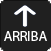
<style>
.page{position:relative;width:51px;height:51px;background:#202020}
.page>*{position:absolute;margin:0}
.t1{font:14px "MyriadPro-Regular";color:#ffffff;text-transform:uppercase}
</style>
<div class="page">
<p class="t1" style="left:4px;top:31px;width:43px;height:10px">ARRIBA</p>
</div>
